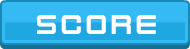
<style>
.page{position:relative;width:190px;height:49px;background:#35baf3}
.page>*{position:absolute;margin:0}
.t1{font:30px "KenVector-Future";color:#ffffff}
</style>
<div class="page">
<p class="t1" style="left:36px;top:15px;width:120px;height:19px">Score</p>
</div>
